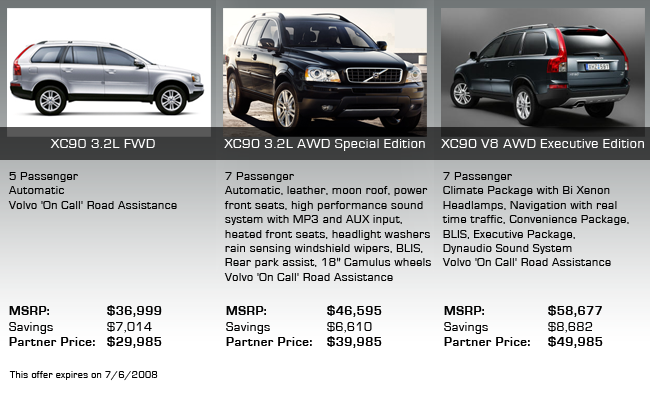
<style>
.page{position:relative;width:650px;height:400px}
.page>*{position:absolute;margin:0}
.t1{font:14px "EurostileRegular";letter-spacing:0.04em;color:#ffffff}
.t2{font:12px "EurostileRegular";letter-spacing:0.04em;color:#000000}
.t3{font:13px "EurostileBold";letter-spacing:0.04em;color:#000000}
.t4{font:13px "EurostileRegular";letter-spacing:0.04em;color:#000000}
.t5{font:10px "EurostileRegular";letter-spacing:0.04em;color:#000000}
</style>
<div class="page">
<p class="t1" style="left:50px;top:139px;width:105px;height:9px">XC90 3.2L FWD</p>
<p class="t1" style="left:224px;top:139px;width:201px;height:12px">XC90 3.2L AWD Special Edition</p>
<p class="t1" style="left:441px;top:139px;width:203px;height:9px">XC90 V8 AWD Executive Edition</p>
<p class="t2" style="left:8px;top:172px;width:169px;height:37px">5 Passenger<br>Automatic<br>Volvo 'On Call' Road Assistance</p>
<p class="t2" style="left:224px;top:172px;width:207px;height:109px">7 Passenger<br>Automatic, leather, moon roof, power<br>front seats, high performance sound<br>system with MP3 and AUX input,<br>heated front seats, headlight washers<br>rain sensing windshield wipers, BLIS,<br>Rear park assist, 18" Camulus wheels<br>Volvo 'On Call' Road Assistance</p>
<p class="t2" style="left:442px;top:172px;width:187px;height:94px">7 Passenger<br>Climate Package with Bi Xenon<br>Headlamps, Navigation with real<br>time traffic, Convenience Package,<br>BLIS, Executive Package,<br>Dynaudio Sound System<br>Volvo 'On Call' Road Assistance</p>
<p class="t3" style="left:107px;top:305px;width:55px;height:43px">$36,999<br><span class="t4">$7,014<br></span>$29,985</p>
<p class="t3" style="left:327px;top:305px;width:55px;height:43px">$46,595<br><span class="t4">$6,610<br></span>$39,985</p>
<p class="t3" style="left:548px;top:305px;width:55px;height:43px">$58,677<br><span class="t4">$8,682<br></span>$49,985</p>
<p class="t3" style="left:9px;top:306px;width:86px;height:40px">MSRP:<br><span class="t4">Savings<br></span>Partner Price:</p>
<p class="t3" style="left:226px;top:306px;width:86px;height:40px">MSRP:<br><span class="t4">Savings<br></span>Partner Price:</p>
<p class="t3" style="left:444px;top:306px;width:86px;height:40px">MSRP:<br><span class="t4">Savings<br></span>Partner Price:</p>
<p class="t5" style="left:9px;top:371px;width:149px;height:10px">This offer expires on 7/6/2008</p>
</div>
